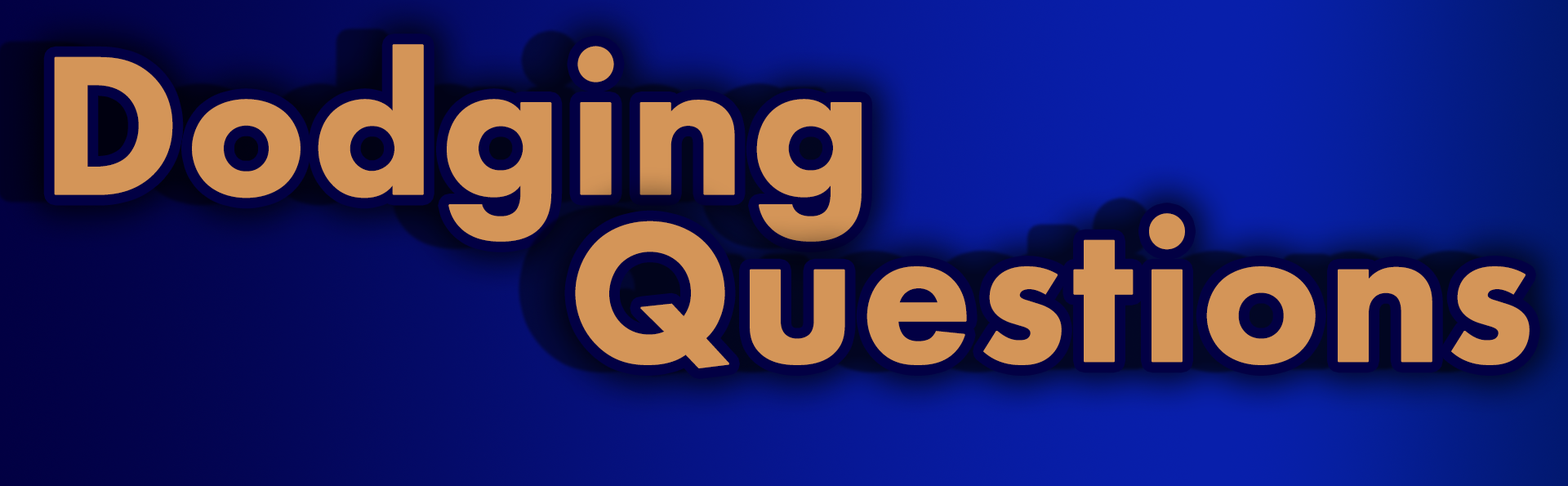
<style>
.page{position:relative;width:1568px;height:486px}
.page>*{position:absolute;margin:0}
.t1{font:204.2px "FuturaPT-Heavy";color:#d49558;font-weight:bold}
</style>
<div class="page">
<p class="t1" style="left:54px;top:44px;width:808px;height:198px">Dodging</p>
<p class="t1" style="left:575px;top:213px;width:955px;height:155px">Questions</p>
</div>
